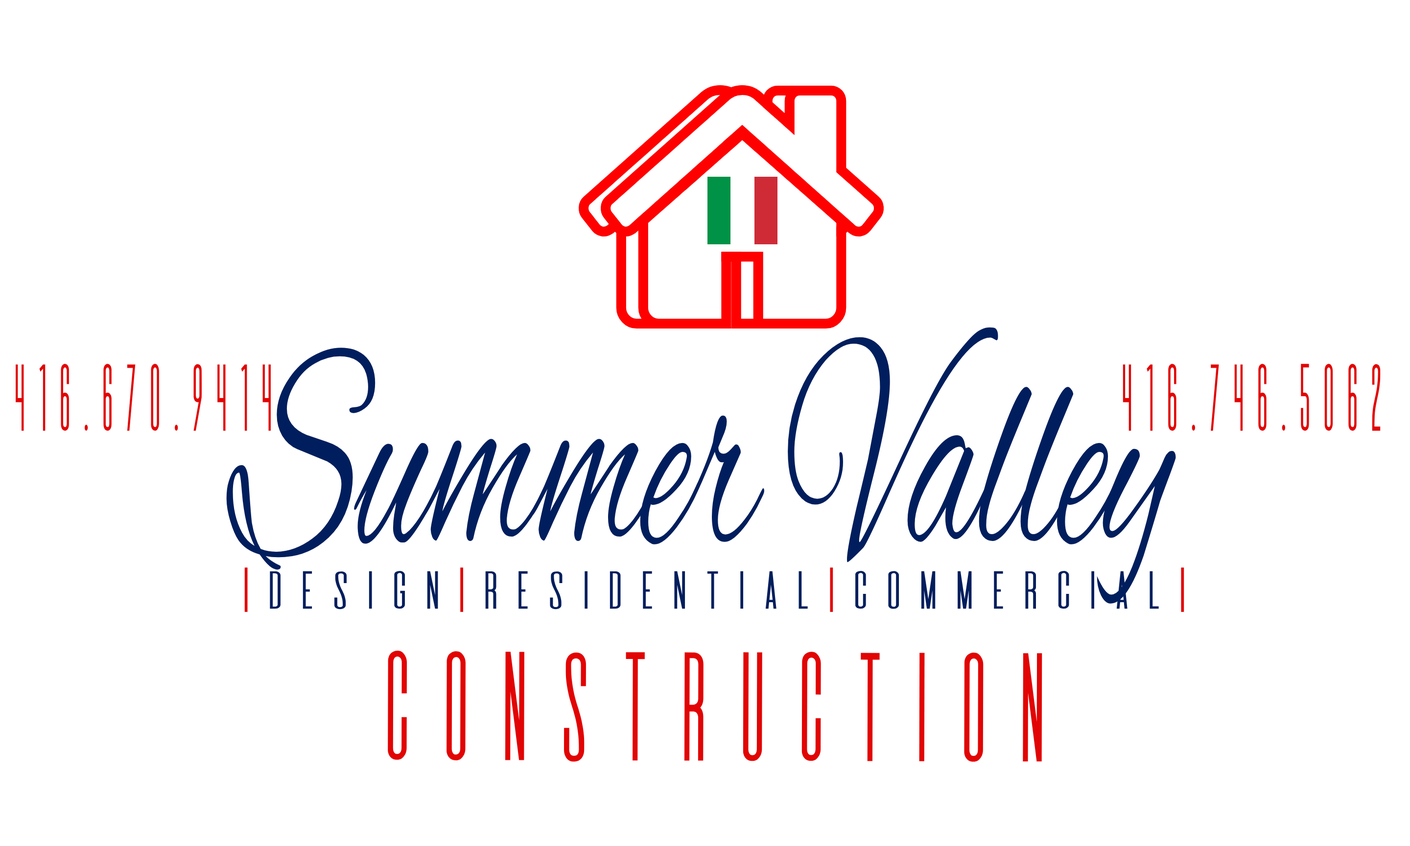
<style>
.page{position:relative;width:1410px;height:846px;background:#ffffff}
.page>*{position:absolute;margin:0}
.t1{font:308.1px "AlexBrush-Regular";color:#001e5d;scale:0.55 1}
.t2{font:82.7px "DeValencia-Regular";letter-spacing:-0.03em;color:#e20404;scale:0.52 1}
.t3{font:46.7px "DeValencia-Regular";color:#001e5d;scale:1.2 1}
.t4{font:46.7px "DeValencia-Regular";color:#e20404;scale:1.2 1}
.t5{font:135.1px "DeValencia-Regular";color:#e20404;scale:0.74 1}
</style>
<div class="page">
<p class="t1" style="left:226px;top:327px;width:950px;height:277px">Summer Valley</p>
<p class="t2" style="left:16px;top:364px;width:255px;height:67px">416.670.9414</p>
<p class="t2" style="left:1122px;top:364px;width:258px;height:67px">416.746.5062</p>
<p class="t3" style="left:244px;top:567px;width:940px;height:45px"><span class="t4">|</span>Design<span class="t4">|</span>Residential<span class="t4">|</span>Commercial<span class="t4">|</span></p>
<p class="t5" style="left:387px;top:651px;width:655px;height:111px">Construction</p>
</div>
